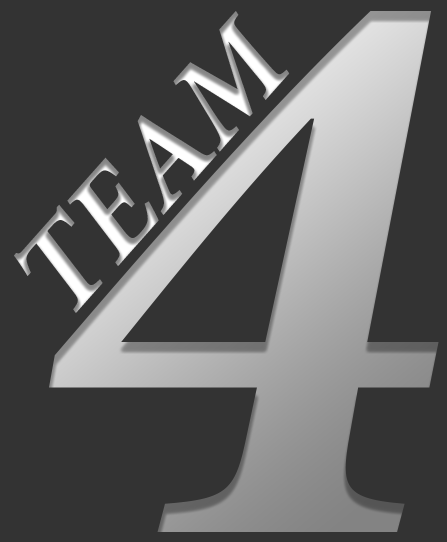
<style>
.page{position:relative;width:447px;height:542px;background:#333333}
.page>*{position:absolute;margin:0}
.t1{font:125px "MinionPro-BoldIt"}
.t2{font:829px "MinionPro-BoldIt"}
</style>
<div class="page">
<p class="t1" style="left:14px;top:11px;width:276px;height:302px;rotate:-48deg">TEAM</p>
<p class="t2" style="left:49px;top:11px;width:390px;height:521px">4</p>
</div>
